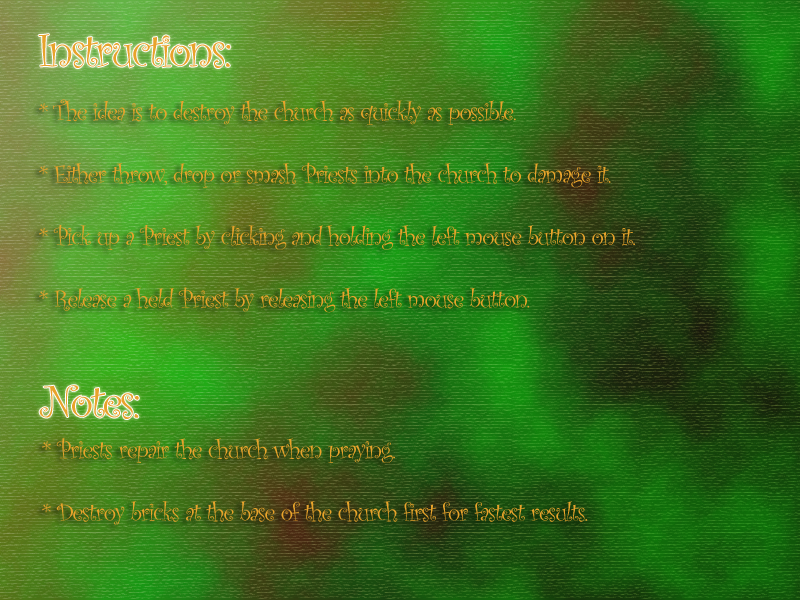
<style>
.page{position:relative;width:800px;height:600px}
.page>*{position:absolute;margin:0}
.t1{font:48px "CurlzMT";letter-spacing:-0.05em;color:#e8a32b}
.t2{font:26px "CurlzMT";letter-spacing:-0.05em;color:#e8a32b}
</style>
<div class="page">
<p class="t1" style="left:38px;top:34px;width:193px;height:34px">Instructions:</p>
<p class="t2" style="left:39px;top:99px;width:596px;height:214px">* The idea is to destroy the church as quickly as possible.<br><br>* Either throw, drop or smash Priests into the church to damage it.<br><br>* Pick up a Priest by clicking and holding the left mouse button on it.<br><br>* Release a held Priest by releasing the left mouse button.</p>
<p class="t1" style="left:39px;top:385px;width:100px;height:34px">Notes:</p>
<p class="t2" style="left:42px;top:438px;width:546px;height:87px">* Priests repair the church when praying.<br><br>* Destroy bricks at the base of the church first for fastest results.</p>
</div>
